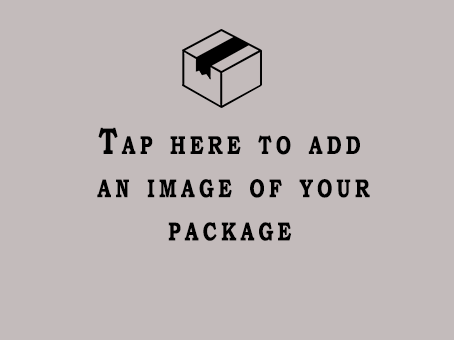
<style>
.page{position:relative;width:454px;height:340px;background:#c3bbbb}
.page>*{position:absolute;margin:0}
.t1{font:37.1px "BookmanOldStyle-Bold";letter-spacing:0.16em;color:#000000;font-variant:small-caps;scale:0.73 1}
</style>
<div class="page">
<p class="t1" style="left:97px;top:127px;width:273px;height:114px;text-align:center">Tap here to add <br>an image of your<br>package</p>
</div>
